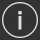
<style>
.page{position:relative;width:40px;height:40px;background:#333333}
.page>*{position:absolute;margin:0}
.t1{font:27px "Calibri";color:#e0e0e0;font-weight:bold}
</style>
<div class="page">
<p class="t1" style="left:18px;top:11px;width:4px;height:19px">i</p>
</div>
